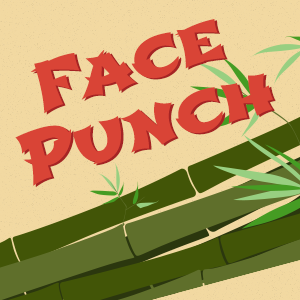
<style>
.page{position:relative;width:300px;height:300px}
.page>*{position:absolute;margin:0}
.t1{font:65.3px/65.3px "Shojumaru-Regular";letter-spacing:-0.01em;color:#d94436}
</style>
<div class="page">
<p class="t1" style="left:15px;top:19px;width:258px;height:167px;text-align:center;rotate:-17deg">Face<br>Punch</p>
<p class="t1" style="left:18px;top:20px;width:258px;height:167px;text-align:center;rotate:-17deg">Face<br>Punch</p>
</div>
